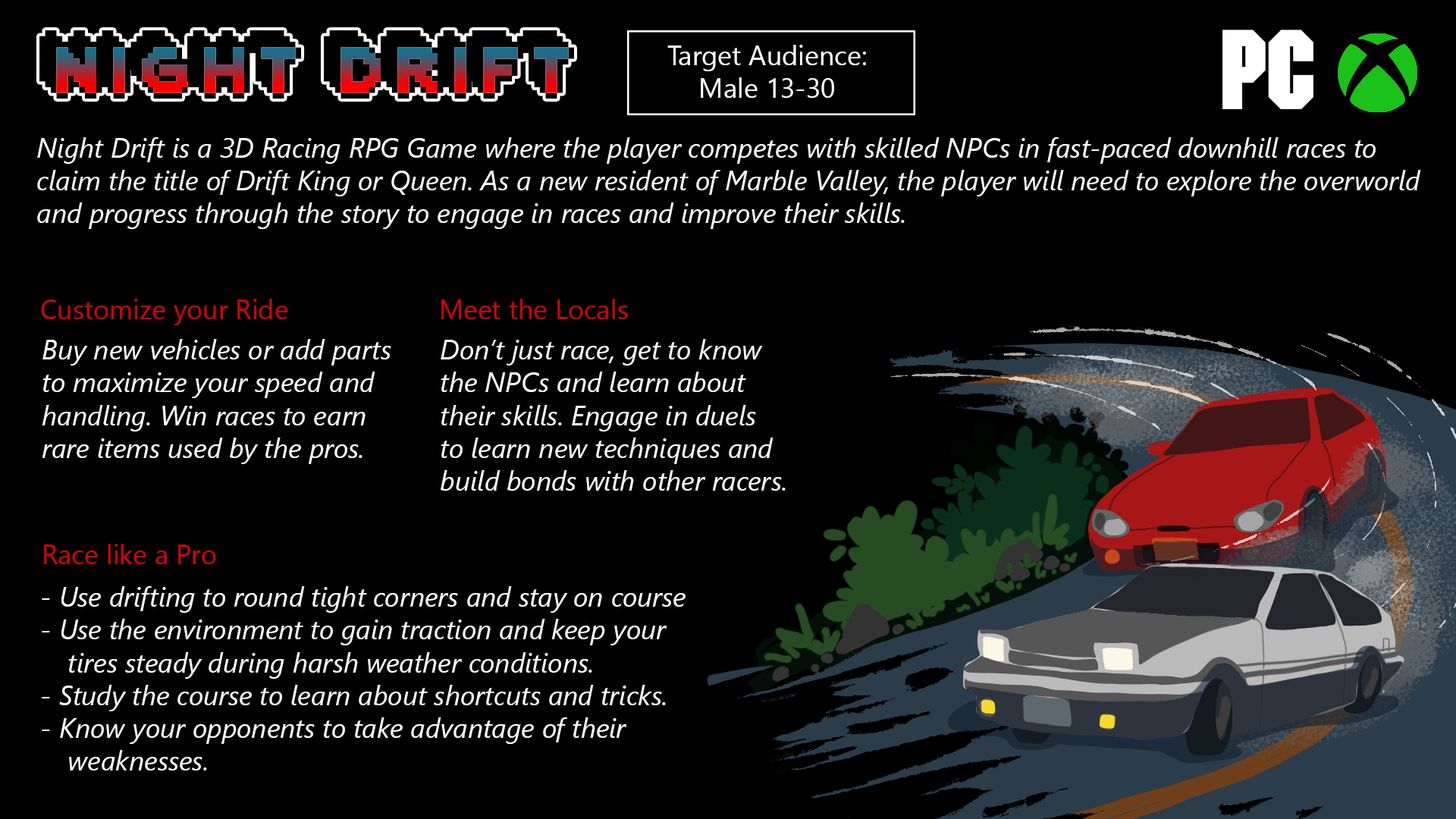
<style>
.page{position:relative;width:1456px;height:819px;background:#000000}
.page>*{position:absolute;margin:0}
.t1{font:91px "Extrude";color:#000000}
.t2{font:27.3px "SegoeUI";color:#ffffff}
.t3{font:27.3px "SegoeUI-Italic";color:#ffffff}
.t4{font:27.3px "SegoeUI";color:#cd0505}
</style>
<div class="page">
<p class="t1" style="left:39px;top:30px;width:535px;height:69px">Night Drift</p>
<p class="t2" style="left:667px;top:45px;width:199px;height:53px;text-align:center">Target Audience:<br>Male 13-30</p>
<p class="t3" style="left:37px;top:137px;width:1384px;height:92px">Night Drift is a 3D Racing RPG Game where the player competes with skilled NPCs in fast-paced downhill races to<br>claim the title of Drift King or Queen. As a new resident of Marble Valley, the player will need to explore the overworld<br>and progress through the story to engage in races and improve their skills.</p>
<p class="t4" style="left:41px;top:299px;width:247px;height:26px">Customize your Ride</p>
<p class="t4" style="left:441px;top:299px;width:187px;height:20px">Meet the Locals</p>
<p class="t3" style="left:42px;top:339px;width:349px;height:125px">Buy new vehicles or add parts<br>to maximize your speed and<br>handling. Win races to earn<br>rare items used by the pros.</p>
<p class="t3" style="left:441px;top:339px;width:345px;height:152px">Don’t just race, get to know<br>the NPCs and learn about<br>their skills. Engage in duels<br>to learn new techniques and<br>build bonds with other racers.</p>
<p class="t4" style="left:44px;top:544px;width:172px;height:20px">Race like a Pro</p>
<p class="t3" style="left:42px;top:586px;width:644px;height:184px">- Use drifting to round tight corners and stay on course<br>- Use the environment to gain traction and keep your<br> tires steady during harsh weather conditions.<br>- Study the course to learn about shortcuts and tricks.<br>- Know your opponents to take advantage of their<br> weaknesses.</p>
</div>
